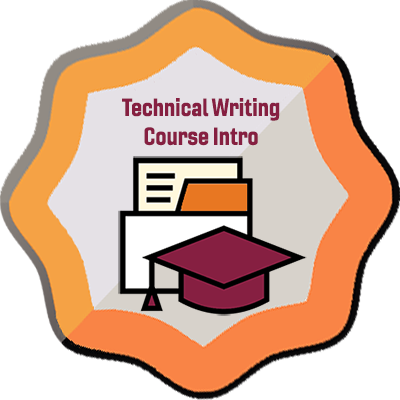
<style>
.page{position:relative;width:400px;height:400px;background:#ffffff}
.page>*{position:absolute;margin:0}
.t1{font:24px "Gineso-ConBol";color:#861f41}
</style>
<div class="page">
<p class="t1" style="left:122px;top:98px;width:158px;height:48px;text-align:center">Technical Writing<br>Course Intro</p>
</div>
